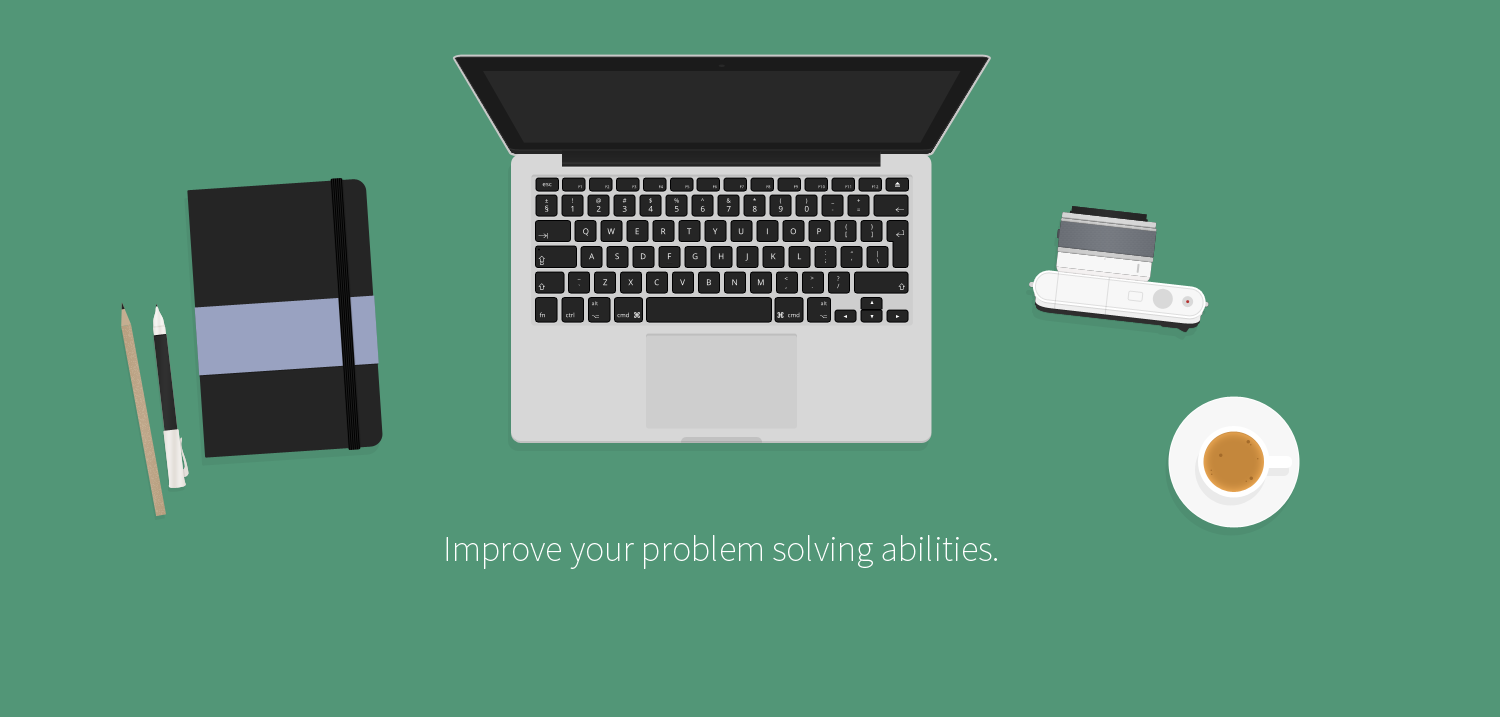
<style>
.page{position:relative;width:1500px;height:717px;background:#529677}
.page>*{position:absolute;margin:0}
.t1{font:36px "SourceSansPro-ExtraLight";color:#ffffff}
</style>
<div class="page">
<p class="t1" style="left:446px;top:535px;width:551px;height:34px">Improve your problem solving abilities.</p>
</div>
